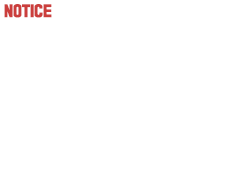
<style>
.page{position:relative;width:239px;height:191px;background:#ffffff}
.page>*{position:absolute;margin:0}
.t1{font:14.1px "SDGdGothic";color:#cb3e3c}
</style>
<div class="page">
<p class="t1" style="left:4px;top:4px;width:48px;height:14px">NOTICE</p>
</div>
